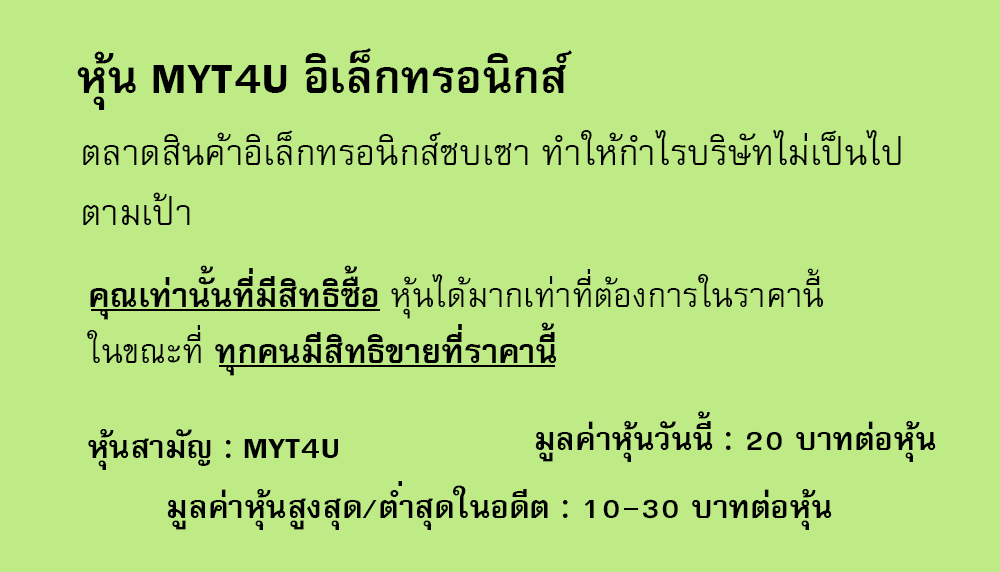
<style>
.page{position:relative;width:1000px;height:572px;background:#beeb85}
.page>*{position:absolute;margin:0}
.t1{font:64px "FreesiaUPCBold";color:#000000}
.t2{font:50px/60px "FreesiaUPC";color:#000000}
.t3{font:47px "FreesiaUPC";color:#000000}
.t4{font:47px "FreesiaUPCBold";color:#000000}
.t5{font:45px "FreesiaUPCBold";color:#000000}
</style>
<div class="page">
<p class="t1" style="left:77px;top:48px;width:495px;height:62px">หุ้น MYT4U อิเล็กทรอนิกส์</p>
<p class="t2" style="left:83px;top:130px;width:818px;height:95px">ตลาดสินค้าอิเล็กทรอนิกส์ซบเซา ทำให้กำไรบริษัทไม่เป็นไป<br>ตามเป้า</p>
<p class="t3" style="left:87px;top:265px;width:737px;height:111px"><span class="t4">คุณเท่านั้นที่มีสิทธิซื้อ </span>หุ้นได้มากเท่าที่ต้องการในราคานี้<br>ในขณะที่<span class="t4"> ทุกคนมีสิทธิขายที่ราคานี้</span></p>
<p class="t5" style="left:535px;top:411px;width:401px;height:51px">มูลค่าหุ้นวันนี้ : 20 บาทต่อหุ้น</p>
<p class="t5" style="left:88px;top:429px;width:250px;height:41px">หุ้นสามัญ : MYT4U</p>
<p class="t5" style="left:167px;top:481px;width:665px;height:49px">มูลค่าหุ้นสูงสุด/ต่ำสุดในอดีต : 10-30 บาทต่อหุ้น</p>
</div>
